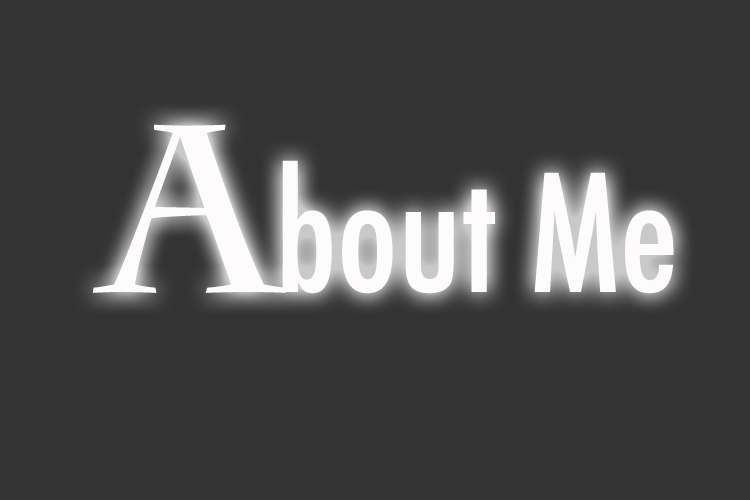
<style>
.page{position:relative;width:750px;height:500px;background:#333333}
.page>*{position:absolute;margin:0}
.t1{font:158px "Futura-CondensedMedium";color:#fdfbfb}
.t2{font:237px "CharlemagneStd-Bold";color:#fdfbfb}
</style>
<div class="page">
<p class="t1" style="left:92px;top:124px;width:582px;height:170px"><span class="t2">A</span>bout Me</p>
</div>
